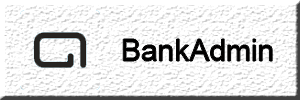
<style>
.page{position:relative;width:300px;height:100px;background:#ffffff}
.page>*{position:absolute;margin:0}
.t1{font:30px "ArialMT";color:#020000}
</style>
<div class="page">
<p class="t1" style="left:123px;top:39px;width:150px;height:22px">BankAdmin</p>
</div>
